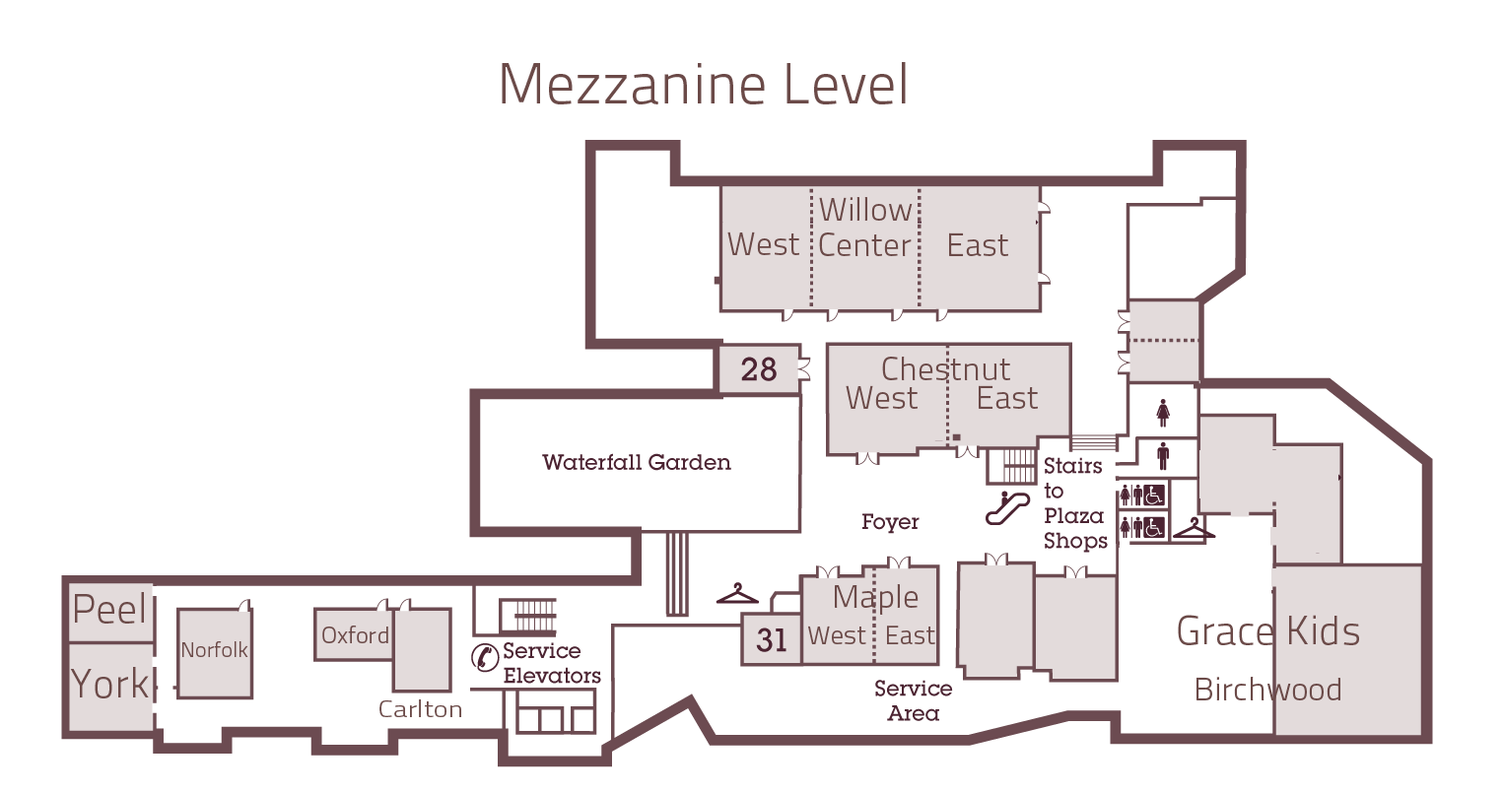
<style>
.page{position:relative;width:1503px;height:793px;background:#ffffff}
.page>*{position:absolute;margin:0}
.t1{font:57.5px "TitilliumText25L-250wt";color:#6b4a48}
.t2{font:32.9px "TitilliumText25L-250wt";color:#6b4a48}
.t3{font:41.1px "TitilliumText25L-250wt";color:#6b4a48}
.t4{font:23.8px "TitilliumText25L-250wt";color:#6b4a48}
.t5{font:26.2px "TitilliumText25L-250wt";color:#6b4a48}
.t6{font:21.4px "TitilliumText25L-250wt";color:#6b4a48}
.t7{font:23.6px "TitilliumText25L-250wt";color:#6b4a48;scale:1.16 1}
</style>
<div class="page">
<p class="t1" style="left:502px;top:62px;width:404px;height:42px">Mezzanine Level</p>
<p class="t2" style="left:819px;top:197px;width:94px;height:24px">Willow</p>
<p class="t2" style="left:727px;top:232px;width:72px;height:23px">West</p>
<p class="t2" style="left:819px;top:233px;width:93px;height:23px">Center</p>
<p class="t2" style="left:949px;top:233px;width:59px;height:23px">East</p>
<p class="t2" style="left:882px;top:357px;width:128px;height:23px">Chestnut</p>
<p class="t2" style="left:846px;top:385px;width:72px;height:24px">West</p>
<p class="t2" style="left:979px;top:385px;width:59px;height:24px">East</p>
<p class="t3" style="left:75px;top:592px;width:69px;height:32px">Peel</p>
<p class="t2" style="left:835px;top:584px;width:84px;height:31px">Maple</p>
<p class="t3" style="left:1178px;top:615px;width:181px;height:31px">Grace Kids</p>
<p class="t4" style="left:322px;top:626px;width:66px;height:18px">Oxford</p>
<p class="t5" style="left:808px;top:626px;width:127px;height:19px">West   East</p>
<p class="t6" style="left:182px;top:642px;width:66px;height:15px">Norfolk</p>
<p class="t3" style="left:70px;top:667px;width:79px;height:32px">York</p>
<p class="t2" style="left:1196px;top:677px;width:144px;height:24px">Birchwood</p>
<p class="t7" style="left:379px;top:700px;width:82px;height:17px">Carlton</p>
</div>
